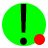
<style>
.page{position:relative;width:48px;height:48px;background:#00ff00}
.page>*{position:absolute;margin:0}
.t1{font:60px "MyriadPro-Regular";color:#000000}
</style>
<div class="page">
<p class="t1" style="left:20px;top:4px;width:7px;height:41px">!</p>
</div>
